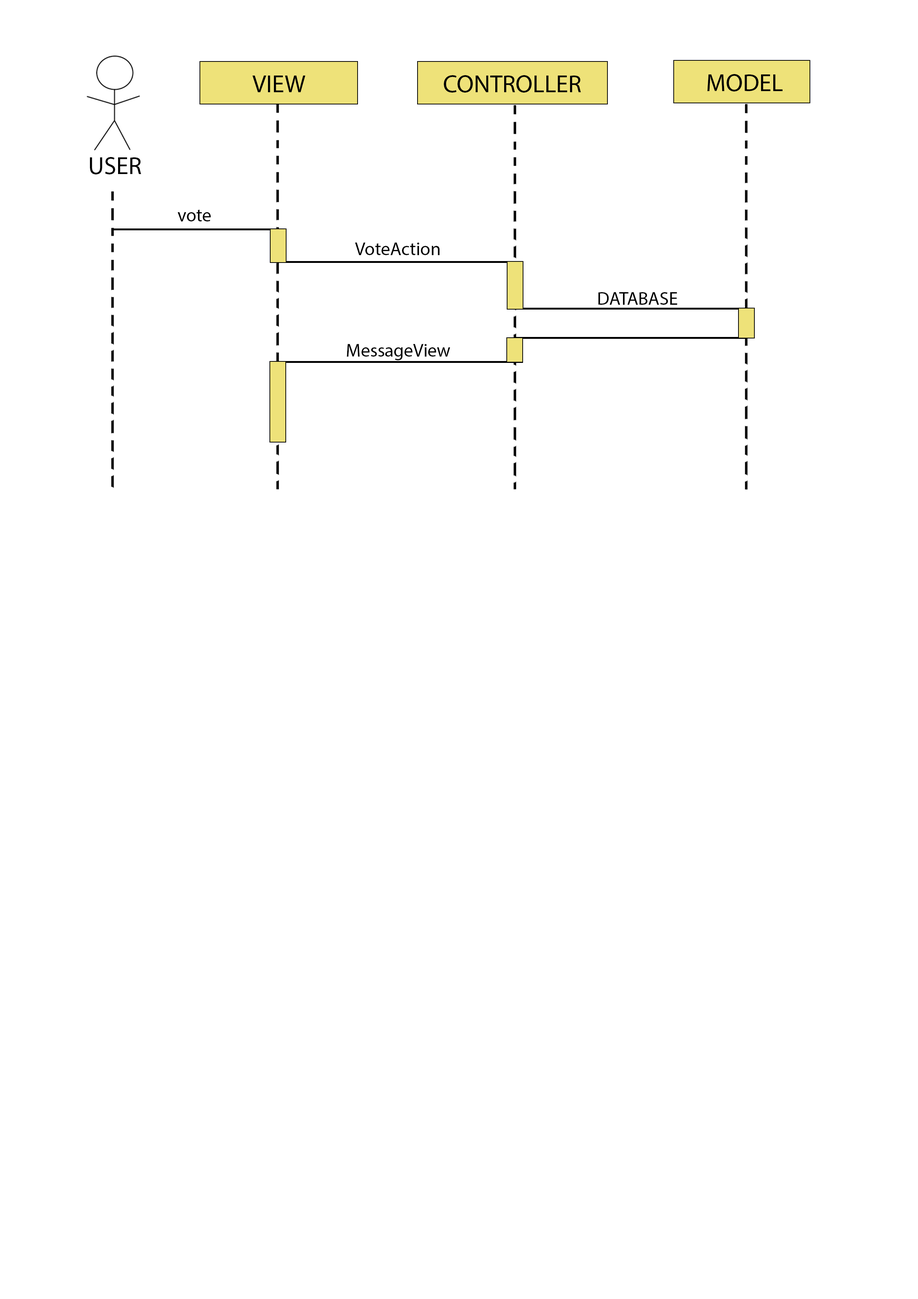
<style>
.page{position:relative;width:918px;height:1299px;background:#ffffff}
.page>*{position:absolute;margin:0}
.t1{font:24.7px "MyriadPro-Regular";color:#000000}
.t2{font:18.5px "MyriadPro-Regular";color:#000000}
</style>
<div class="page">
<p class="t1" style="left:252px;top:76px;width:53px;height:16px">VIEW</p>
<p class="t1" style="left:444px;top:75px;width:137px;height:18px">CONTROLLER</p>
<p class="t1" style="left:707px;top:74px;width:76px;height:17px">MODEL</p>
<p class="t1" style="left:90px;top:157px;width:51px;height:17px">USER</p>
<p class="t2" style="left:178px;top:210px;width:33px;height:11px">vote</p>
<p class="t2" style="left:355px;top:242px;width:85px;height:13px">VoteAction</p>
<p class="t2" style="left:598px;top:292px;width:80px;height:13px">DATABASE</p>
<p class="t2" style="left:347px;top:344px;width:103px;height:16px">MessageView</p>
</div>
